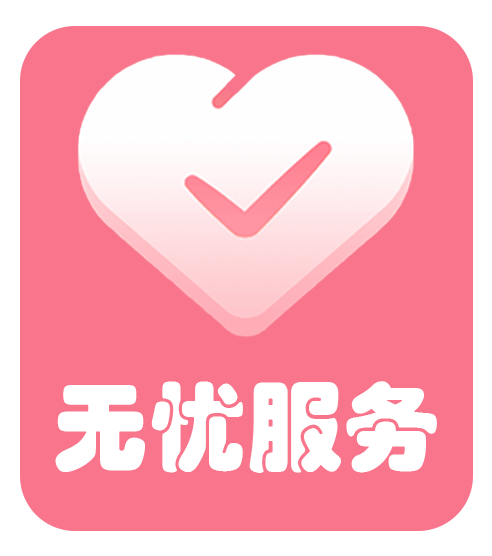
<style>
.page{position:relative;width:492px;height:556px;background:#f8758b}
.page>*{position:absolute;margin:0}
.t1{font:97.3px "STHupo";color:#ffffff}
</style>
<div class="page">
<p class="t1" style="left:55px;top:381px;width:382px;height:92px">无忧服务</p>
</div>
